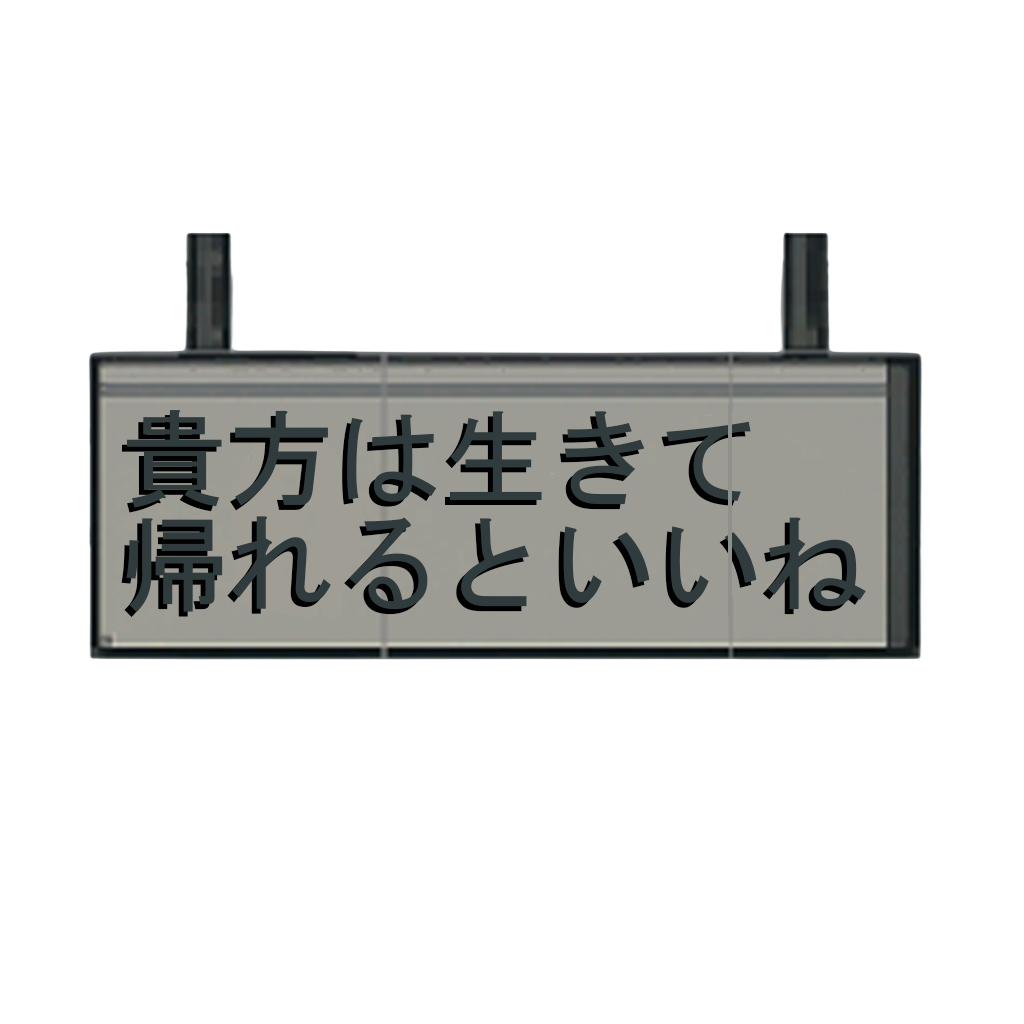
<style>
.page{position:relative;width:1024px;height:1024px;background:#ffffff}
.page>*{position:absolute;margin:0}
.t1{font:107px/105.7px "MS-Gothic";color:#303b3e}
.t2{font:107px/105.7px "MS-Gothic"}
</style>
<div class="page">
<p class="t1" style="left:126px;top:410px;width:740px;height:203px">貴方は生きて<br>帰れるといいね</p>
<p class="t2" style="left:121px;top:415px;width:740px;height:203px">貴方は生きて<br>帰れるといいね</p>
</div>
